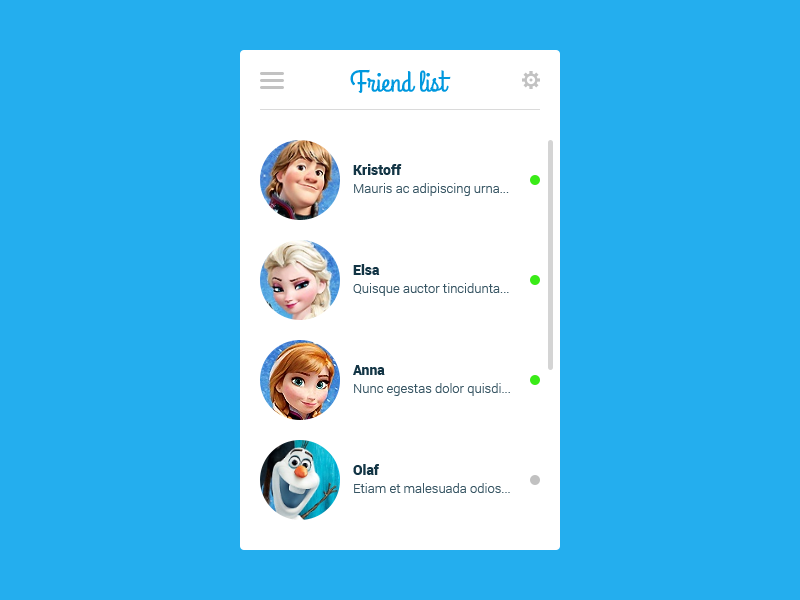
<style>
.page{position:relative;width:800px;height:600px;background:#24aeee}
.page>*{position:absolute;margin:0}
.t1{font:30px "GrandHotel-Regular";color:#0098de}
.t2{font:14px "Roboto-Black";color:#133545}
.t3{font:13px "Roboto-Light";color:#385664}
</style>
<div class="page">
<p class="t1" style="left:350px;top:69px;width:101px;height:24px">Friend list</p>
<p class="t2" style="left:353px;top:164px;width:49px;height:11px">Kristoff</p>
<p class="t3" style="left:354px;top:183px;width:155px;height:13px">Mauris ac adipiscing urna...</p>
<p class="t2" style="left:353px;top:264px;width:27px;height:11px">Elsa</p>
<p class="t3" style="left:353px;top:283px;width:156px;height:13px">Quisque auctor tincidunta...</p>
<p class="t2" style="left:353px;top:365px;width:32px;height:10px">Anna</p>
<p class="t3" style="left:354px;top:383px;width:156px;height:13px">Nunc egestas dolor quisdi...</p>
<p class="t2" style="left:353px;top:464px;width:26px;height:11px">Olaf</p>
<p class="t3" style="left:354px;top:483px;width:156px;height:10px">Etiam et malesuada odios...</p>
</div>
